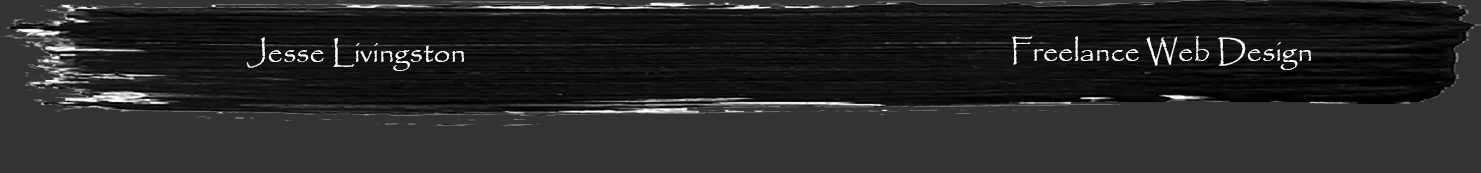
<style>
.page{position:relative;width:1481px;height:173px;background:#333333}
.page>*{position:absolute;margin:0}
.t1{font:30px "Papyrus-Regular";color:#ffffff}
</style>
<div class="page">
<p class="t1" style="left:246px;top:37px;width:218px;height:34px">Jesse Livingston</p>
<p class="t1" style="left:1012px;top:36px;width:299px;height:34px">Freelance Web Design</p>
</div>
